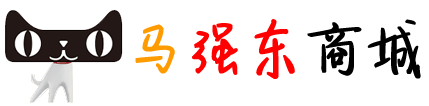
<style>
.page{position:relative;width:429px;height:106px;background:#ffffff}
.page>*{position:absolute;margin:0}
.t1{font:57.6px "SentyTEA-basic";color:#ff0000;font-weight:bold}
.t2{font:57.6px "SentyTEA-basic";color:#fe9b00;font-weight:bold}
.t3{font:57.6px "SentyTEA-basic";color:#000000;font-weight:bold}
</style>
<div class="page">
<p class="t1" style="left:135px;top:19px;width:286px;height:60px"><span class="t2">马</span>强东<span class="t3">商城</span></p>
</div>
